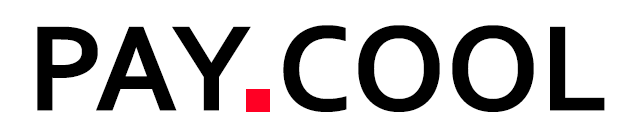
<style>
.page{position:relative;width:628px;height:139px;background:#ffffff}
.page>*{position:absolute;margin:0}
.t1{font:128px "Corbel-Bold";color:#000000}
</style>
<div class="page">
<p class="t1" style="left:37px;top:25px;width:568px;height:87px">PAY.COOL</p>
</div>
